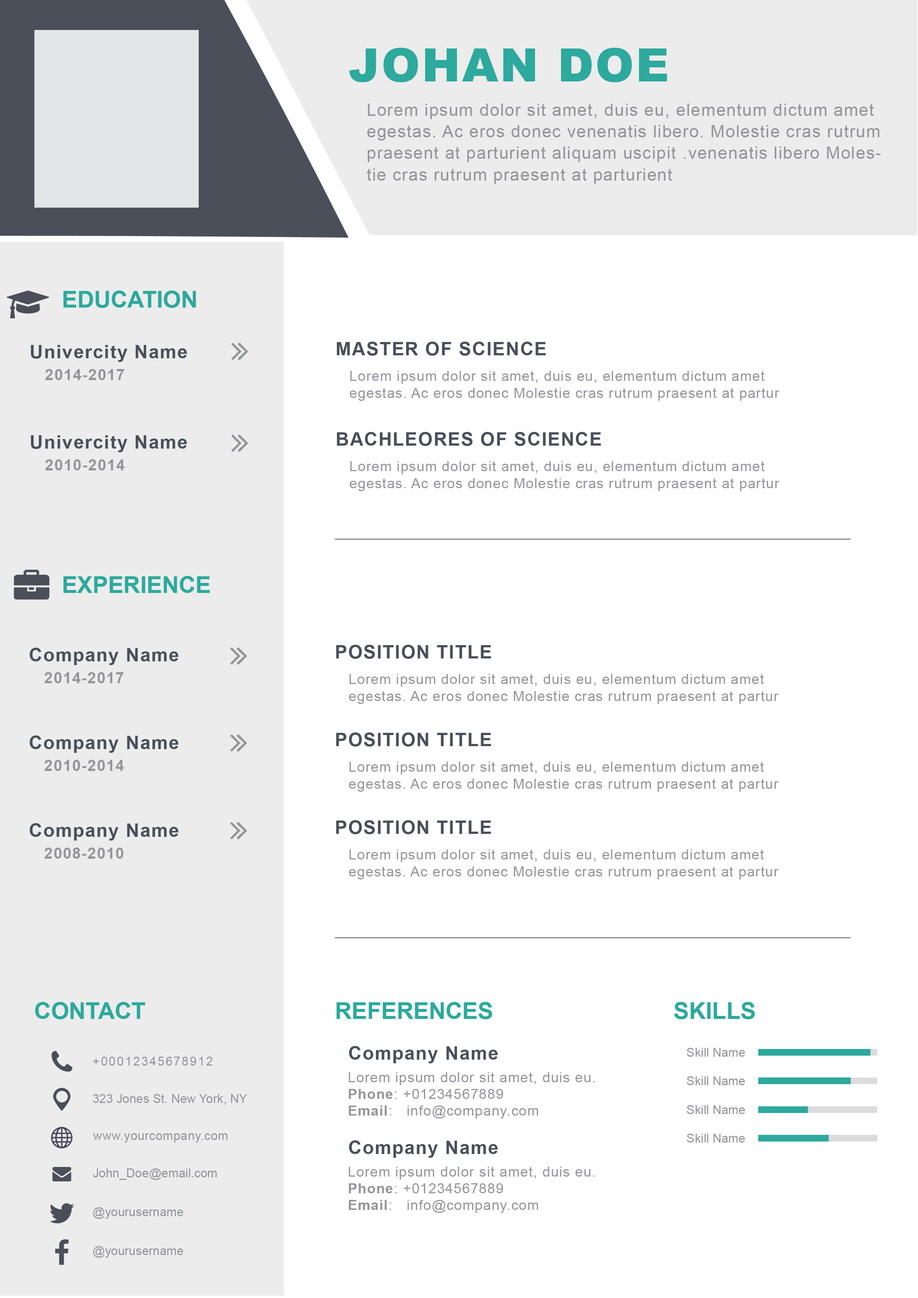
<style>
.page{position:relative;width:918px;height:1298px;background:#ffffff}
.page>*{position:absolute;margin:0}
.t1{font:46.3px "Arial-Black";letter-spacing:0.04em;color:#2da99d}
.t2{font:17px/21.6px "ArialMT";letter-spacing:0.05em;color:#939598}
.t3{font:23.1px "Arial-BoldMT";color:#2da99d}
.t4{font:18.5px "Arial-BoldMT";letter-spacing:0.05em;color:#4a4f5a}
.t5{font:18.5px/3.7px "Arial-BoldMT";letter-spacing:0.05em;color:#4a4f5a}
.t6{font:15.4px/21.6px "Arial-BoldMT";letter-spacing:0.05em;color:#939598}
.t7{font:13.9px/17px "ArialMT";letter-spacing:0.05em;color:#939598}
.t8{font:12.3px "ArialMT";color:#939598}
.t9{font:12.3px "ArialMT";letter-spacing:0.1em;color:#939598}
.t10{font:13.9px "ArialMT";letter-spacing:0.05em;color:#939598}
.t11{font:13.9px "Arial-BoldMT";letter-spacing:0.05em;color:#939598}
.t12{font:12.3px "ArialMT";letter-spacing:0.025em;color:#939598}
</style>
<div class="page">
<p class="t1" style="left:349px;top:48px;width:318px;height:34px">JOHAN DOE</p>
<p class="t2" style="left:367px;top:104px;width:514px;height:80px">Lorem ipsum dolor sit amet, duis eu, elementum dictum amet egestas. Ac eros donec venenatis libero. Molestie cras rutrum praesent at parturient aliquam uscipit .venenatis libero Molestie cras rutrum praesent at parturient</p>
<p class="t3" style="left:63px;top:291px;width:133px;height:17px">EDUCATION</p>
<p class="t4" style="left:337px;top:342px;width:209px;height:14px">MASTER OF SCIENCE</p>
<p class="t5" style="left:31px;top:345px;width:156px;height:35px">Univercity Name<br>  <span class="t6"> 2014-2017</span></p>
<p class="t7" style="left:350px;top:371px;width:430px;height:30px">Lorem ipsum dolor sit amet, duis eu, elementum dictum amet egestas. Ac eros donec Molestie cras rutrum praesent at partur</p>
<p class="t5" style="left:31px;top:435px;width:156px;height:36px">Univercity Name<br><span class="t6">   2010-2014</span></p>
<p class="t4" style="left:337px;top:432px;width:264px;height:14px">BACHLEORES OF SCIENCE</p>
<p class="t7" style="left:350px;top:461px;width:430px;height:30px">Lorem ipsum dolor sit amet, duis eu, elementum dictum amet egestas. Ac eros donec Molestie cras rutrum praesent at partur</p>
<p class="t3" style="left:63px;top:576px;width:147px;height:17px">EXPERIENCE</p>
<p class="t5" style="left:30px;top:648px;width:148px;height:35px">Company Name<br><span class="t6">   2014-2017</span></p>
<p class="t4" style="left:336px;top:645px;width:155px;height:14px">POSITION TITLE</p>
<p class="t7" style="left:349px;top:674px;width:430px;height:30px">Lorem ipsum dolor sit amet, duis eu, elementum dictum amet egestas. Ac eros donec Molestie cras rutrum praesent at partur</p>
<p class="t5" style="left:30px;top:736px;width:148px;height:35px">Company Name<br>   <span class="t6">2010-2014</span></p>
<p class="t4" style="left:336px;top:733px;width:155px;height:14px">POSITION TITLE</p>
<p class="t7" style="left:349px;top:762px;width:430px;height:30px">Lorem ipsum dolor sit amet, duis eu, elementum dictum amet egestas. Ac eros donec Molestie cras rutrum praesent at partur</p>
<p class="t4" style="left:336px;top:820px;width:155px;height:14px">POSITION TITLE</p>
<p class="t5" style="left:30px;top:823px;width:148px;height:36px">Company Name<br>   <span class="t6">2008-2010</span></p>
<p class="t7" style="left:349px;top:850px;width:430px;height:30px">Lorem ipsum dolor sit amet, duis eu, elementum dictum amet egestas. Ac eros donec Molestie cras rutrum praesent at partur</p>
<p class="t3" style="left:35px;top:1002px;width:110px;height:18px">CONTACT</p>
<p class="t3" style="left:337px;top:1002px;width:155px;height:18px">REFERENCES</p>
<p class="t3" style="left:675px;top:1002px;width:80px;height:18px">SKILLS</p>
<p class="t4" style="left:349px;top:1046px;width:149px;height:18px">Company Name</p>
<p class="t8" style="left:687px;top:1048px;width:58px;height:9px">Skill Name</p>
<p class="t9" style="left:93px;top:1057px;width:119px;height:9px">+00012345678912</p>
<p class="t10" style="left:349px;top:1072px;width:246px;height:47px">Lorem ipsum dolor sit amet, duis eu.<br><span class="t11">Phone</span>: +01234567889<br><span class="t11">Email</span>:   info@company.com</p>
<p class="t8" style="left:687px;top:1077px;width:58px;height:8px">Skill Name</p>
<p class="t8" style="left:93px;top:1094px;width:154px;height:11px">323 Jones St. New York, NY</p>
<p class="t8" style="left:687px;top:1105px;width:58px;height:9px">Skill Name</p>
<p class="t12" style="left:93px;top:1134px;width:135px;height:9px">www.yourcompany.com</p>
<p class="t8" style="left:687px;top:1134px;width:58px;height:9px">Skill Name</p>
<p class="t4" style="left:349px;top:1141px;width:149px;height:17px">Company Name</p>
<p class="t8" style="left:93px;top:1169px;width:124px;height:11px">John_Doe@email.com</p>
<p class="t10" style="left:349px;top:1167px;width:246px;height:46px">Lorem ipsum dolor sit amet, duis eu.<br><span class="t11">Phone</span>: +01234567889<br><span class="t11">Email</span>:   info@company.com</p>
<p class="t8" style="left:93px;top:1208px;width:90px;height:11px">@yourusername</p>
<p class="t8" style="left:93px;top:1246px;width:90px;height:12px">@yourusername</p>
</div>
